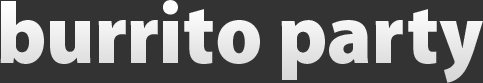
<style>
.page{position:relative;width:483px;height:83px;background:#333333}
.page>*{position:absolute;margin:0}
.t1{font:86.7px "MyriadPro-BlackSemiCn";color:#ffffff}
</style>
<div class="page">
<p class="t1" style="left:0px;top:0px;width:483px;height:83px">burrito party</p>
</div>
